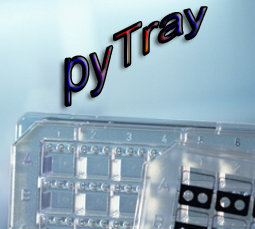
<style>
.page{position:relative;width:255px;height:229px}
.page>*{position:absolute;margin:0}
.t1{font:48px "ArialMT"}
</style>
<div class="page">
<p class="t1" style="left:66px;top:7px;width:141px;height:99px">pyTray</p>
</div>
